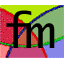
<style>
.page{position:relative;width:64px;height:64px}
.page>*{position:absolute;margin:0}
.t1{font:48px "LucidaConsole";color:#000000}
.t2{font:45.8px "LucidaConsole";color:#000000;scale:1.19 1}
</style>
<div class="page">
<p class="t1" style="left:6px;top:10px;width:26px;height:38px">f</p>
<p class="t2" style="left:26px;top:23px;width:29px;height:25px">m</p>
</div>
